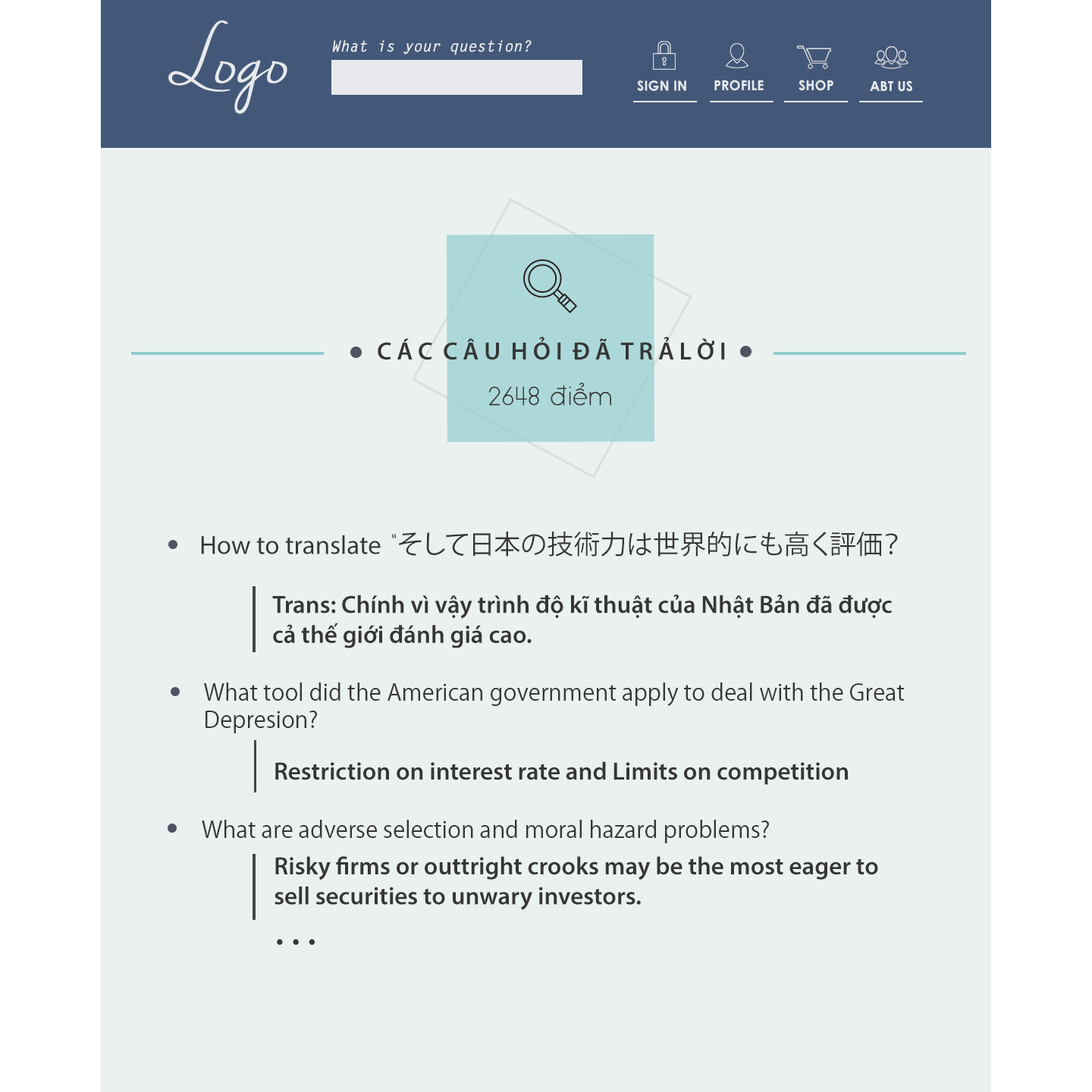
<style>
.page{position:relative;width:1092px;height:1092px;background:#ebf1f1}
.page>*{position:absolute;margin:0}
.t1{font:72.4px "NellaSueDemo";color:#ffffff}
.t2{font:15.2px "LetterGothicStd-BoldSlanted";color:#ffffff}
.t3{font:13.6px "CenturyGothic-Bold";color:#ffffff}
.t4{font:25px "MyriadPro-Semibold";color:#363636}
.t5{font:26.5px "FS-Nokio-Light";color:#363636}
.t6{font:26.5px "KozGoPr6N-Regular";color:#363636}
.t7{font:26.5px "MyriadPro-Regular";color:#363636}
.t8{font:22.7px "KozGoPr6N-Regular";color:#363636}
.t9{font:36.4px "MyriadPro-Semibold";color:#363636}
</style>
<div class="page">
<p class="t1" style="left:168px;top:20px;width:119px;height:94px">Logo</p>
<p class="t2" style="left:332px;top:40px;width:200px;height:15px">What is your question?</p>
<p class="t3" style="left:637px;top:80px;width:49px;height:11px">SIGN IN</p>
<p class="t3" style="left:714px;top:80px;width:50px;height:11px">PROFILE</p>
<p class="t3" style="left:799px;top:80px;width:34px;height:11px">SHOP</p>
<p class="t3" style="left:870px;top:80px;width:42px;height:12px">ABT US</p>
<p class="t4" style="left:378px;top:337px;width:347px;height:23px">C Á C  C Â U  H Ỏ I  Đ Ã  T R Ả L Ờ I</p>
<p class="t5" style="left:489px;top:382px;width:122px;height:24px">2648 điểm</p>
<p class="t6" style="left:201px;top:531px;width:697px;height:26px"><span class="t7">How to translate</span><span class="t5"> “</span>そして日本の技術力は世界的にも高く評価？</p>
<p class="t4" style="left:272px;top:595px;width:620px;height:53px">Trans: Chính vì vậy trình độ kĩ thuật của Nhật Bản đã được <br>cả thế giới đánh giá cao.</p>
<p class="t8" style="left:204px;top:682px;width:701px;height:51px">What tool did the American government apply to deal with the Great <br>Depresion?</p>
<p class="t4" style="left:275px;top:761px;width:573px;height:24px">Restriction on interest rate and Limits on competition</p>
<p class="t8" style="left:202px;top:820px;width:567px;height:23px">What are adverse selection and moral hazard problems?</p>
<p class="t4" style="left:275px;top:856px;width:603px;height:54px">Risky firms or outtright crooks may be the most eager to <br>sell securities to unwary investors.</p>
<p class="t9" style="left:277px;top:939px;width:38px;height:6px">. . .</p>
</div>
